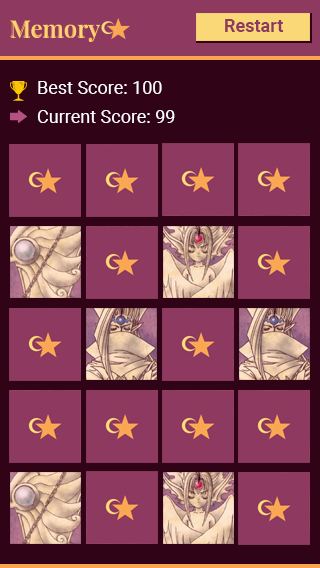
<style>
.page{position:relative;width:320px;height:568px;background:#8e3960}
.page>*{position:absolute;margin:0}
.t1{font:24.1px "PlayfairDisplay-Regular";color:#fad777}
.t2{font:18px "Roboto-Bold";color:#8e3960}
.t3{font:18px "Roboto-Regular";color:#ffffff}
</style>
<div class="page">
<p class="t1" style="left:11px;top:21px;width:89px;height:21px">Memory</p>
<p class="t2" style="left:225px;top:19px;width:58px;height:13px">Restart</p>
<p class="t3" style="left:38px;top:81px;width:124px;height:13px">Best Score: 100</p>
<p class="t3" style="left:37px;top:110px;width:138px;height:13px">Current Score: 99</p>
</div>
